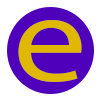
<style>
.page{position:relative;width:100px;height:100px;background:#ffffff}
.page>*{position:absolute;margin:0}
.t1{font:124.3px "MyriadPro-Regular";color:#e0b800;scale:1.19 1}
</style>
<div class="page">
<p class="t1" style="left:18px;top:20px;width:64px;height:62px">e</p>
</div>
